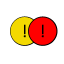
<style>
.page{position:relative;width:64px;height:64px;background:#ffffff}
.page>*{position:absolute;margin:0}
.t1{font:17.9px "Calibri";color:#000000}
</style>
<div class="page">
<p class="t1" style="left:23px;top:24px;width:3px;height:14px">!</p>
<p class="t1" style="left:41px;top:24px;width:3px;height:14px">!</p>
</div>
